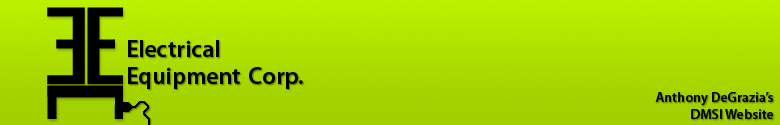
<style>
.page{position:relative;width:780px;height:125px}
.page>*{position:absolute;margin:0}
.t1{font:24px "MyriadPro-Semibold";color:#000000}
.t2{font:14px "MyriadPro-Semibold";color:#000000}
</style>
<div class="page">
<p class="t1" style="left:128px;top:40px;width:91px;height:17px">Electrical</p>
<p class="t1" style="left:128px;top:67px;width:112px;height:22px">Equipment</p>
<p class="t1" style="left:249px;top:67px;width:54px;height:22px">Corp.</p>
<p class="t2" style="left:655px;top:92px;width:118px;height:27px;text-align:right">Anthony DeGrazia’s  <br>DMSI Website</p>
</div>
